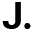
<style>
.page{position:relative;width:32px;height:32px;background:#ffffff}
.page>*{position:absolute;margin:0}
.t1{font:37.5px "Roboto-Bold";color:#000000}
</style>
<div class="page">
<p class="t1" style="left:2px;top:2px;width:29px;height:27px">J.</p>
</div>
